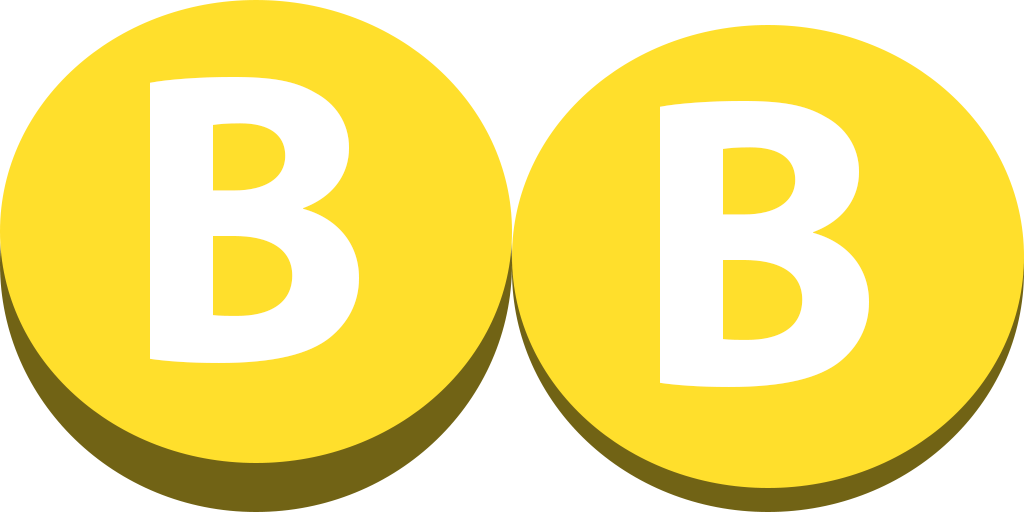
<style>
.page{position:relative;width:1024px;height:512px;background:#ffdf2c}
.page>*{position:absolute;margin:0}
.t1{font:416.7px "MyriadPro-Bold";color:#ffffff}
</style>
<div class="page">
<p class="t1" style="left:150px;top:77px;width:209px;height:286px">B</p>
<p class="t1" style="left:660px;top:101px;width:209px;height:286px">B</p>
</div>
